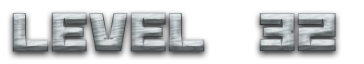
<style>
.page{position:relative;width:364px;height:64px;background:#ffffff}
.page>*{position:absolute;margin:0}
.t1{font:60px "BananaBrick"}
</style>
<div class="page">
<p class="t1" style="left:12px;top:12px;width:324px;height:40px">Level  32</p>
</div>
